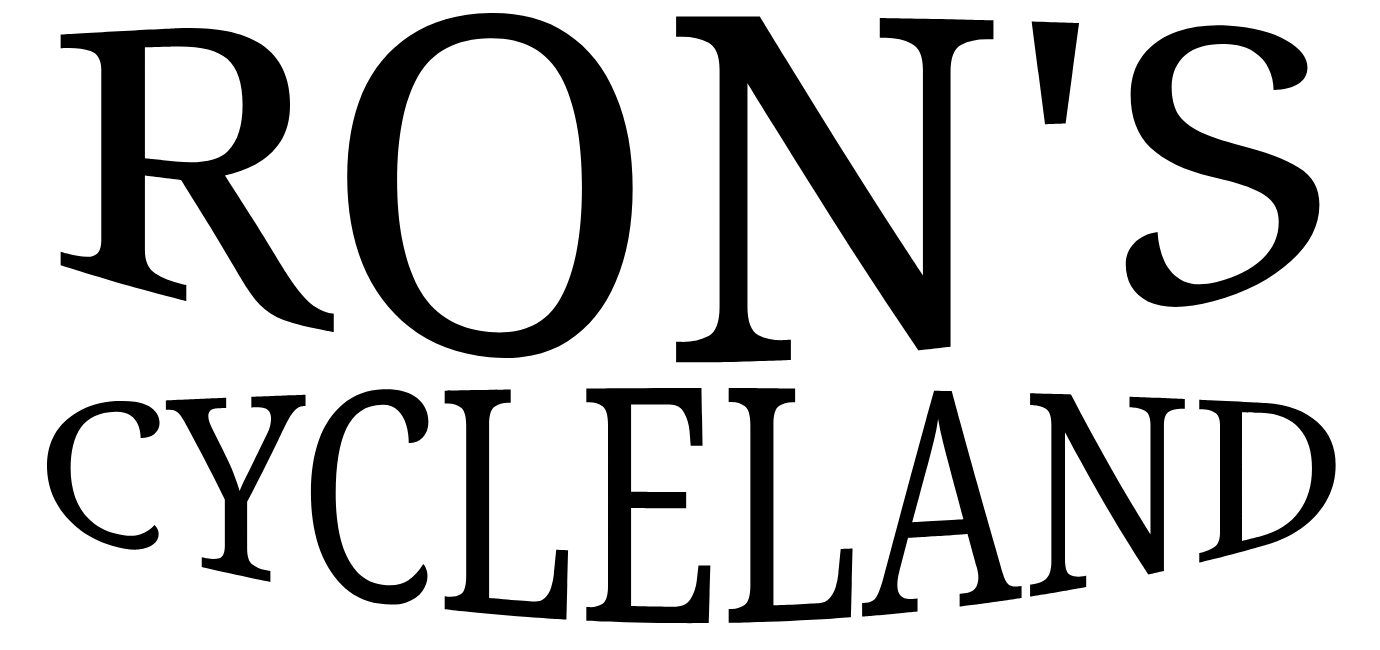
<style>
.page{position:relative;width:1380px;height:650px;background:#ffffff}
.page>*{position:absolute;margin:0}
.t1{font:314.3px "NotoSerifGrantha-Regular";color:#000000;scale:1.42 1}
.t2{font:157px "NotoSerifGrantha-Regular";color:#000000;scale:1.42 1}
</style>
<div class="page">
<p class="t1" style="left:60px;top:13px;width:1260px;height:350px">RON'S</p>
<p class="t2" style="left:46px;top:388px;width:1290px;height:236px">CYCLELAND</p>
</div>
